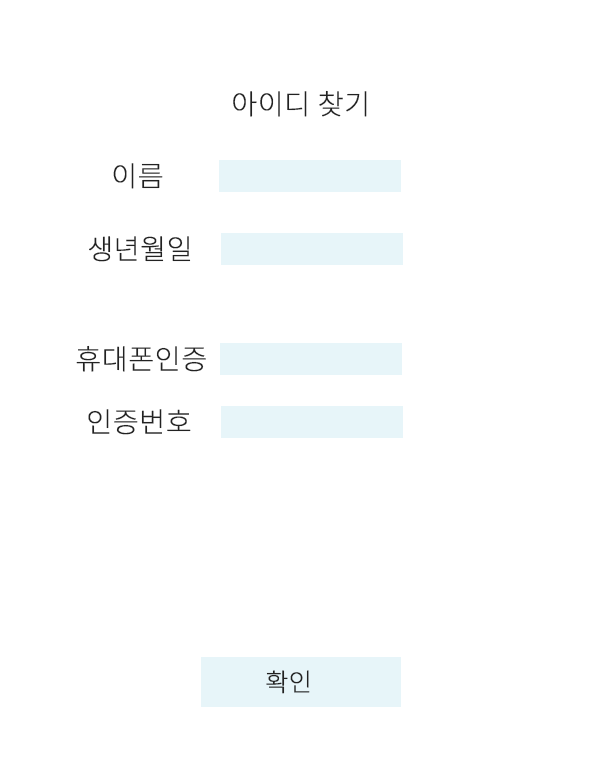
<style>
.page{position:relative;width:600px;height:768px;background:#ffffff}
.page>*{position:absolute;margin:0}
.t1{font:28px "NotoSansKR-Thin";color:#222222;font-weight:bold}
.t2{font:25px "NotoSansKR-Thin";color:#222222;font-weight:bold}
</style>
<div class="page">
<p class="t1" style="left:233px;top:90px;width:134px;height:27px">아이디 찾기</p>
<p class="t1" style="left:113px;top:163px;width:50px;height:26px">이름</p>
<p class="t1" style="left:89px;top:236px;width:102px;height:26px">생년월일</p>
<p class="t1" style="left:76px;top:345px;width:130px;height:27px">휴대폰인증</p>
<p class="t1" style="left:88px;top:409px;width:103px;height:26px">인증번호</p>
<p class="t2" style="left:266px;top:670px;width:44px;height:24px">확인</p>
</div>
